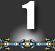
<style>
.page{position:relative;width:55px;height:51px;background:#333333}
.page>*{position:absolute;margin:0}
.t1{font:36px "Impact";color:#ffffff}
</style>
<div class="page">
<p class="t1" style="left:22px;top:1px;width:13px;height:28px">1</p>
</div>
